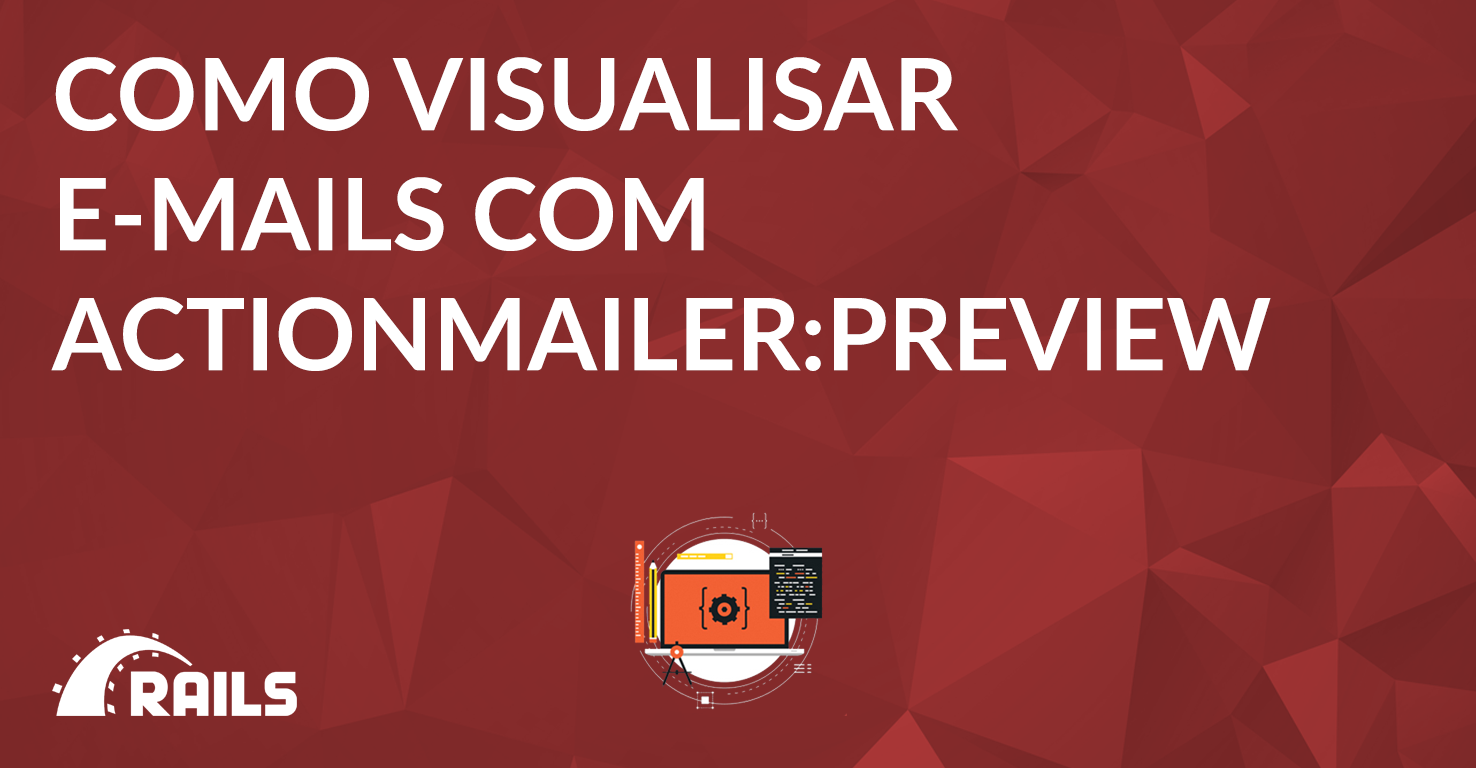
<style>
.page{position:relative;width:1476px;height:768px}
.page>*{position:absolute;margin:0}
.t1{font:100px "Lato-Bold";color:#ffffff}
</style>
<div class="page">
<p class="t1" style="left:51px;top:57px;width:1220px;height:314px">COMO VISUALISAR<br>E-MAILS COM <br>ACTIONMAILER:PREVIEW</p>
</div>
